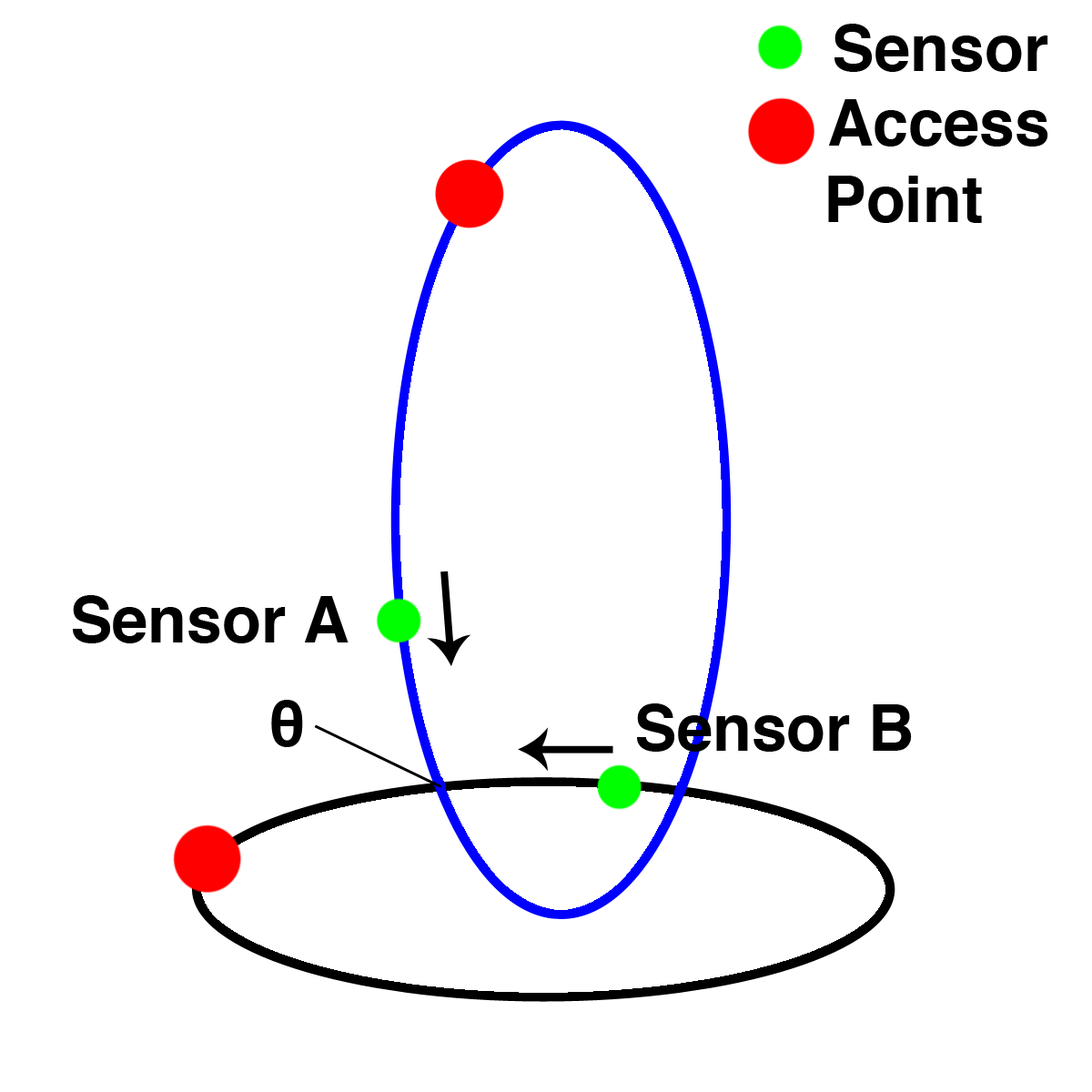
<style>
.page{position:relative;width:1092px;height:1092px;background:#ffffff}
.page>*{position:absolute;margin:0}
.t1{font:63.7px "Helvetica-Bold";color:#000000}
</style>
<div class="page">
<p class="t1" style="left:834px;top:24px;width:214px;height:48px">Sensor</p>
<p class="t1" style="left:828px;top:99px;width:220px;height:124px;text-align:center">Access<br>Point</p>
<p class="t1" style="left:73px;top:595px;width:276px;height:48px">Sensor A</p>
<p class="t1" style="left:271px;top:700px;width:32px;height:47px">θ</p>
<p class="t1" style="left:637px;top:703px;width:275px;height:49px">Sensor B</p>
</div>
